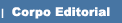
<style>
.page{position:relative;width:122px;height:23px;background:#4775a3}
.page>*{position:absolute;margin:0}
.t1{font:12px "Arial-Black";color:#fffeff}
.t2{font:10px "Arial-Black";color:#fffeff}
</style>
<div class="page">
<p class="t1" style="left:1px;top:7px;width:109px;height:12px"><span class="t2">|</span>  Corpo Editorial</p>
</div>
